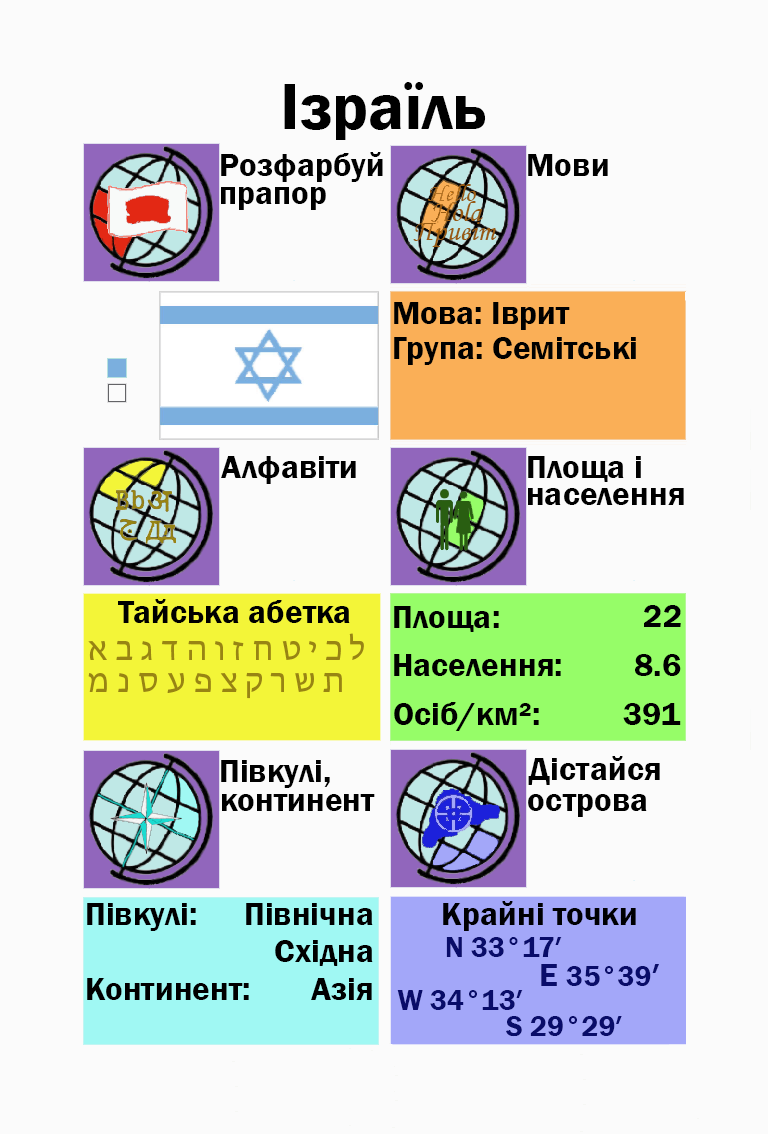
<style>
.page{position:relative;width:768px;height:1134px;background:#fbfbfb}
.page>*{position:absolute;margin:0}
.t1{font:66.7px "FranklinGothic-Demi";color:#000000}
.t2{font:33.3px "FranklinGothic-Demi";color:#000000}
.t3{font:33.3px "FranklinGothic-Demi";color:#000003}
.t4{font:33.3px "MyriadHebrew-Regular";color:#988413}
.t5{font:29.2px "FranklinGothic-Demi";color:#988413}
.t6{font:29.2px "FranklinGothic-Demi";color:#090c69}
.t7{font:33.3px "FranklinGothic-Demi";color:#090c69}
</style>
<div class="page">
<p class="t1" style="left:284px;top:82px;width:202px;height:58px">Ізраїль</p>
<p class="t2" style="left:221px;top:152px;width:162px;height:30px">Розфарбуй</p>
<p class="t2" style="left:528px;top:154px;width:80px;height:22px">Мови</p>
<p class="t2" style="left:221px;top:187px;width:105px;height:23px">прапор</p>
<p class="t2" style="left:394px;top:302px;width:176px;height:28px">Мова: Іврит</p>
<p class="t2" style="left:394px;top:337px;width:242px;height:28px">Група: Семітські</p>
<p class="t2" style="left:221px;top:456px;width:135px;height:28px">Алфавіти</p>
<p class="t2" style="left:528px;top:456px;width:113px;height:26px">Площа і</p>
<p class="t2" style="left:528px;top:488px;width:156px;height:17px">населення</p>
<p class="t2" style="left:118px;top:599px;width:232px;height:24px">Тайська абетка</p>
<p class="t2" style="left:394px;top:606px;width:105px;height:26px">Площа:</p>
<p class="t3" style="left:644px;top:605px;width:37px;height:22px">22</p>
<p class="t4" style="left:88px;top:633px;width:276px;height:27px"><span class="t5"><br></span>א ב ג ד ה ו ז ח ט י כ ל</p>
<p class="t2" style="left:394px;top:654px;width:167px;height:22px">Населення:</p>
<p class="t2" style="left:635px;top:654px;width:46px;height:22px">8.6</p>
<p class="t4" style="left:88px;top:672px;width:254px;height:27px">מ נ ס ע פ צ ק ר ש ת</p>
<p class="t2" style="left:394px;top:702px;width:145px;height:29px">Осіб/км²:</p>
<p class="t2" style="left:623px;top:703px;width:58px;height:22px">391</p>
<p class="t2" style="left:221px;top:760px;width:109px;height:28px">Півкулі,</p>
<p class="t2" style="left:528px;top:756px;width:132px;height:29px">Дістайся</p>
<p class="t2" style="left:222px;top:794px;width:153px;height:17px">континент</p>
<p class="t2" style="left:528px;top:794px;width:119px;height:23px">острова</p>
<p class="t2" style="left:87px;top:903px;width:109px;height:28px">Півкулі:</p>
<p class="t2" style="left:246px;top:903px;width:127px;height:22px">Північна</p>
<p class="t3" style="left:443px;top:901px;width:193px;height:30px">Крайні точки</p>
<p class="t2" style="left:275px;top:940px;width:98px;height:26px">Східна</p>
<p class="t6" style="left:446px;top:937px;width:116px;height:20px">N 33°17′</p>
<p class="t6" style="left:541px;top:964px;width:118px;height:22px"><span class="t7">E </span>35°39<span class="t7">′</span></p>
<p class="t2" style="left:87px;top:978px;width:162px;height:22px">Континент:</p>
<p class="t2" style="left:311px;top:978px;width:61px;height:22px">Азія</p>
<p class="t6" style="left:397px;top:990px;width:126px;height:20px">W 34°13′</p>
<p class="t6" style="left:506px;top:1016px;width:116px;height:21px">S 29°29′</p>
</div>
